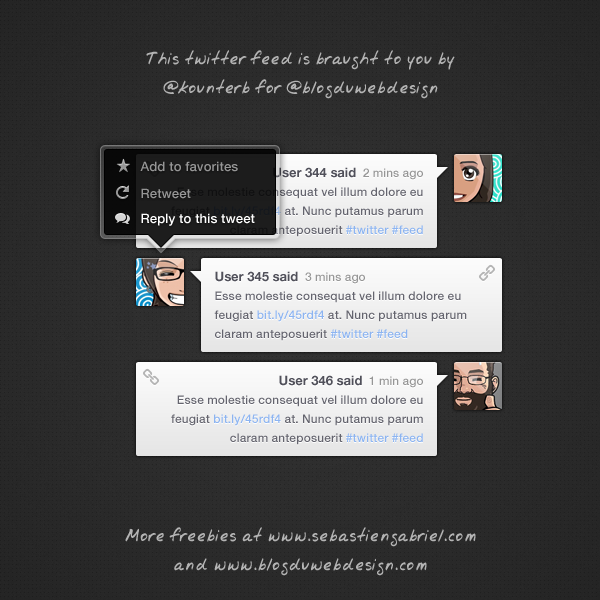
<style>
.page{position:relative;width:600px;height:600px}
.page>*{position:absolute;margin:0}
.t1{font:20px/29px "Jrhand";color:#b4b4b4}
.t2{font:13px "HelveticaNeue-Medium";letter-spacing:0.01em;color:#969696}
.t3{font:13px "HelveticaNeue-Medium";letter-spacing:0.01em;color:#ffffff}
.t4{font:12px/19px "HelveticaNeue-Medium";color:#64646e}
.t5{font:13px/19px "HelveticaNeue-Bold";color:#50505a}
.t6{font:12px/19px "HelveticaNeue-Medium";color:#969696}
.t7{font:12px/19px "HelveticaNeue-Medium";color:#8cb4f1}
</style>
<div class="page">
<p class="t1" style="left:146px;top:50px;width:309px;height:49px;text-align:center">This twitter feed is braught to you by<br>@kounterb for @blogduwebdesign</p>
<p class="t2" style="left:140px;top:161px;width:98px;height:11px">Add to favorites</p>
<p class="t2" style="left:141px;top:188px;width:50px;height:11px">Retweet</p>
<p class="t3" style="left:141px;top:213px;width:114px;height:13px">Reply to this tweet</p>
<p class="t4" style="left:214px;top:271px;width:253px;height:70px"><span class="t5">User 345 said  </span><span class="t6">3 mins ago<br></span>Esse molestie consequat vel illum dolore eu feugiat <span class="t7">bit.ly/45rdf4 </span>at. Nunc putamus parum claram anteposuerit <span class="t7">#twitter #feed</span></p>
<p class="t4" style="left:171px;top:375px;width:252px;height:70px;text-align:right"><span class="t5">User 346 said  </span><span class="t6">1 min ago<br></span>Esse molestie consequat vel illum dolore eu feugiat <span class="t7">bit.ly/45rdf4 </span>at. Nunc putamus parum claram anteposuerit <span class="t7">#twitter #feed</span></p>
<p class="t1" style="left:125px;top:527px;width:351px;height:49px;text-align:center">More freebies at www.sebastiengabriel.com<br>and www.blogduwebdesign.com</p>
</div>
